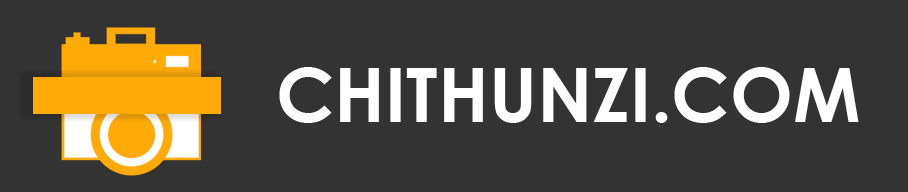
<style>
.page{position:relative;width:908px;height:192px;background:#333333}
.page>*{position:absolute;margin:0}
.t1{font:75px "CenturyGothic-Bold";color:#ffffff}
</style>
<div class="page">
<p class="t1" style="left:279px;top:67px;width:580px;height:56px">CHITHUNZI.COM</p>
</div>
